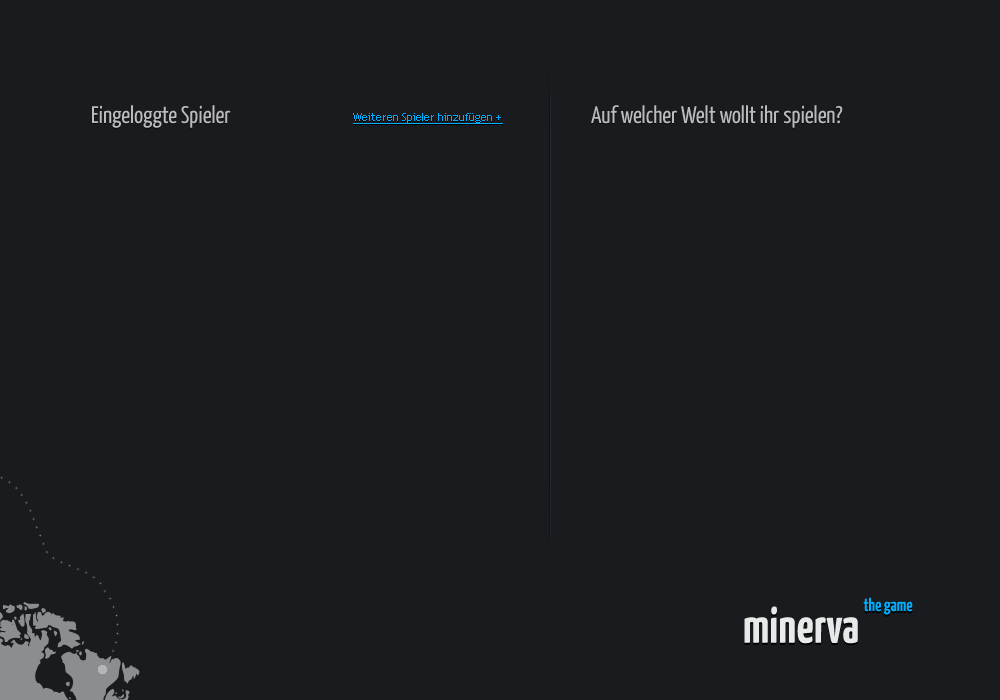
<style>
.page{position:relative;width:1000px;height:700px;background:#191b1e}
.page>*{position:absolute;margin:0}
.t1{font:24px "YanoneKaffeesatz-Regular";color:#babbbc}
.t2{font:11px "TrebuchetMS";color:#01aefd;text-decoration:underline}
.t3{font:50px "YanoneKaffeesatz-Bold";color:#ffffff}
.t4{font:18px "YanoneKaffeesatz-Bold";color:#01aefd}
</style>
<div class="page">
<p class="t1" style="left:92px;top:105px;width:139px;height:23px">Eingeloggte Spieler</p>
<p class="t2" style="left:353px;top:113px;width:150px;height:11px">Weiteren Spieler hinzufügen +</p>
<p class="t1" style="left:591px;top:105px;width:252px;height:23px">Auf welcher Welt wollt ihr spielen?</p>
<p class="t3" style="left:744px;top:606px;width:114px;height:38px">minerva</p>
<p class="t4" style="left:863px;top:597px;width:50px;height:18px">the game</p>
</div>
